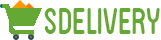
<style>
.page{position:relative;width:161px;height:40px;background:#ffffff}
.page>*{position:absolute;margin:0}
.t1{font:36px "FVAlmelo";color:#65a834;scale:0.87 1}
</style>
<div class="page">
<p class="t1" style="left:44px;top:8px;width:116px;height:26px">SDELIVERY</p>
</div>
